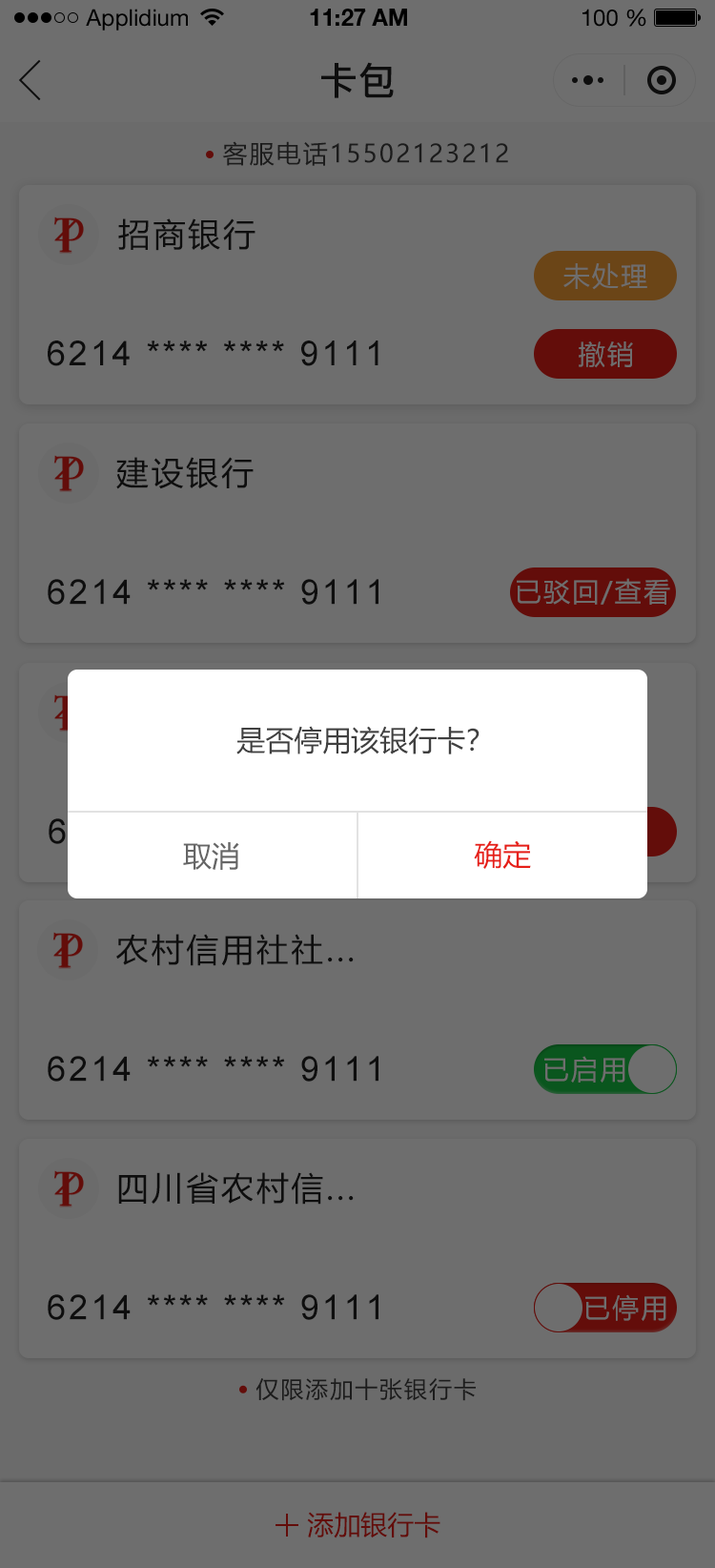
<style>
.page{position:relative;width:715px;height:1568px;background:#6e6e6e}
.page>*{position:absolute;margin:0}
.t1{font:22.9px "HelveticaNeueLTStd-Roman";color:#000000}
.t2{font:22.9px "HelveticaNeueLTStd-Bd";color:#000000}
.t3{font:38.2px "PingFang-SC-Bold";color:#202020;text-transform:uppercase}
.t4{font:24.8px "MicrosoftYaHei";letter-spacing:0.08em;color:#1c1c1c}
.t5{font:32.4px "MicrosoftYaHei";letter-spacing:0.08em;color:#202020}
.t6{font:26.7px "MicrosoftYaHei";letter-spacing:0.08em;color:#6e6e6e}
.t7{font:34.3px "ArialMT";letter-spacing:0.08em;color:#202020}
.t8{font:28.6px "MicrosoftYaHei";color:#404040;text-transform:uppercase}
.t9{font:28.6px "MicrosoftYaHei";color:#666666;text-transform:uppercase}
.t10{font:28.6px "MicrosoftYaHei";color:#e61f18;text-transform:uppercase}
.t11{font:22.9px "MicrosoftYaHei";letter-spacing:0.08em;color:#1c1c1c}
.t12{font:26.7px "MicrosoftYaHei";color:#630d0a;text-transform:uppercase}
</style>
<div class="page">
<p class="t1" style="left:86px;top:9px;width:102px;height:22px">Applidium</p>
<p class="t2" style="left:310px;top:9px;width:97px;height:17px">11:27 AM</p>
<p class="t1" style="left:583px;top:9px;width:64px;height:18px">100 %</p>
<p class="t3" style="left:321px;top:62px;width:73px;height:36px">卡包</p>
<p class="t4" style="left:222px;top:141px;width:286px;height:25px">客服电话15502123212</p>
<p class="t5" style="left:118px;top:218px;width:138px;height:33px">招商银行</p>
<p class="t6" style="left:564px;top:263px;width:84px;height:27px">未处理</p>
<p class="t7" style="left:48px;top:340px;width:331px;height:26px">6214 **** **** 9111</p>
<p class="t6" style="left:579px;top:341px;width:54px;height:27px">撤销</p>
<p class="t5" style="left:116px;top:457px;width:138px;height:32px">建设银行</p>
<p class="t7" style="left:48px;top:579px;width:331px;height:26px">6214 **** **** 9111</p>
<p class="t6" style="left:517px;top:578px;width:154px;height:27px">已驳回/查看</p>
<p class="t8" style="left:237px;top:726px;width:243px;height:28px">是否停用该银行卡？</p>
<p class="t9" style="left:183px;top:842px;width:56px;height:28px">取消</p>
<p class="t10" style="left:474px;top:840px;width:57px;height:29px">确定</p>
<p class="t5" style="left:116px;top:934px;width:238px;height:32px">农村信用社社...</p>
<p class="t7" style="left:48px;top:1056px;width:331px;height:26px">6214 **** **** 9111</p>
<p class="t6" style="left:545px;top:1056px;width:81px;height:27px">已启用</p>
<p class="t5" style="left:118px;top:1172px;width:236px;height:33px">四川省农村信...</p>
<p class="t7" style="left:48px;top:1294px;width:331px;height:26px">6214 **** **** 9111</p>
<p class="t6" style="left:586px;top:1294px;width:81px;height:27px">已停用</p>
<p class="t11" style="left:256px;top:1378px;width:220px;height:23px">仅限添加十张银行卡</p>
<p class="t12" style="left:307px;top:1512px;width:134px;height:26px">添加银行卡</p>
</div>
